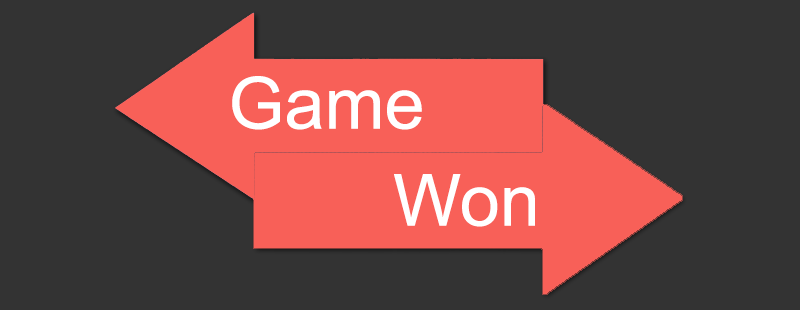
<style>
.page{position:relative;width:800px;height:310px;background:#333333}
.page>*{position:absolute;margin:0}
.t1{font:72px "ArialMT";color:#ffffff}
</style>
<div class="page">
<p class="t1" style="left:232px;top:76px;width:190px;height:54px">Game</p>
<p class="t1" style="left:394px;top:174px;width:141px;height:53px">Won</p>
</div>
